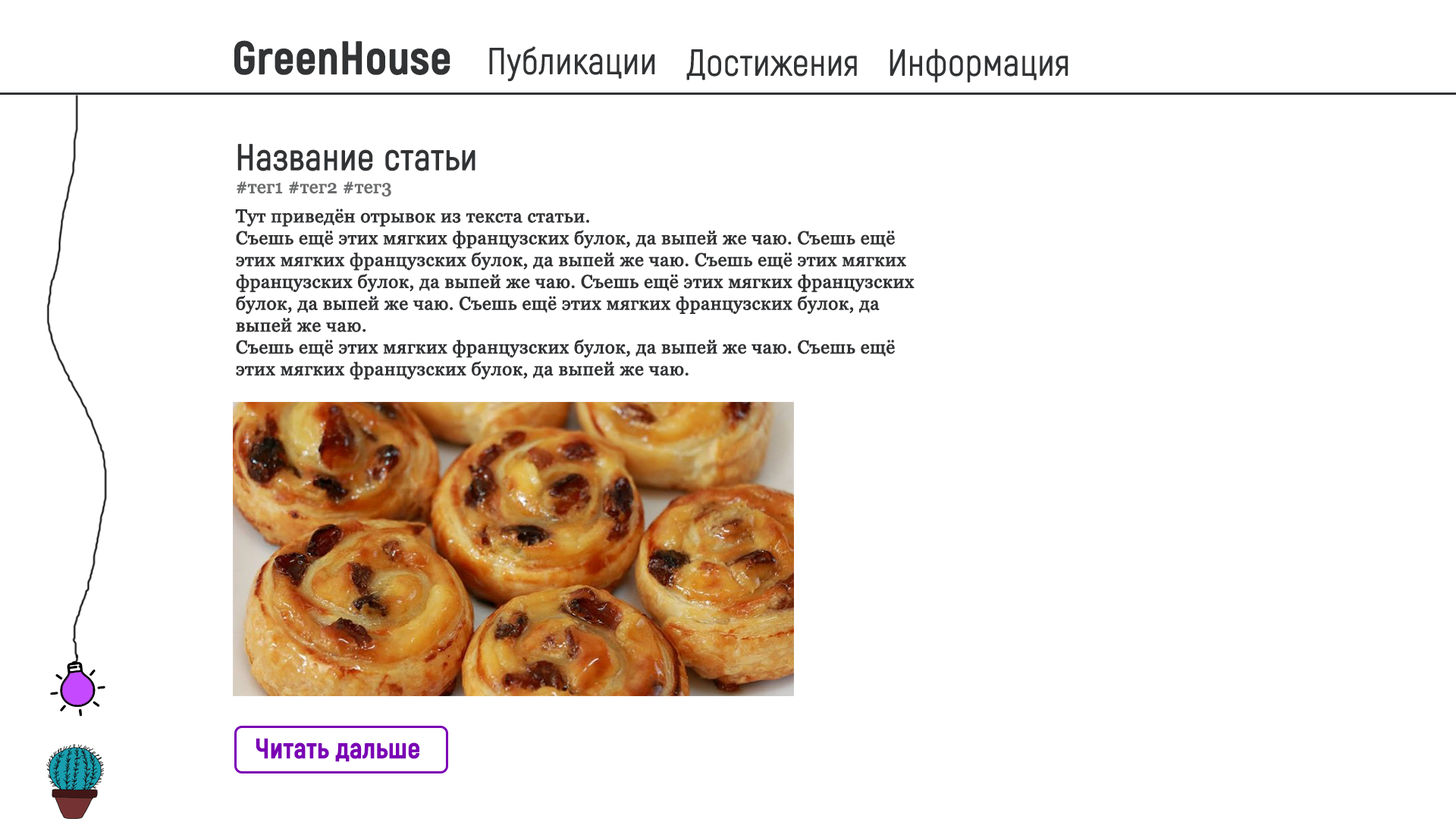
<style>
.page{position:relative;width:1456px;height:819px;background:#ffffff}
.page>*{position:absolute;margin:0}
.t1{font:45.5px "Akrobat-Bold";color:#313335;font-weight:bold}
.t2{font:36.4px "Akrobat-Light";color:#313335;font-weight:bold}
.t3{font:36.4px "Akrobat-Regular";color:#313335;font-weight:bold}
.t4{font:18.2px "Georgia";color:#6b6c6d;font-weight:bold}
.t5{font:18.2px "Georgia";color:#313335;font-weight:bold}
.t6{font:18.2px/6.1px "Georgia";color:#313335;font-weight:bold}
.t7{font:27.3px "Akrobat-Bold";color:#7b00b5;font-weight:bold}
</style>
<div class="page">
<p class="t1" style="left:234px;top:40px;width:216px;height:35px">GreenHouse</p>
<p class="t2" style="left:489px;top:46px;width:166px;height:35px">Публикации</p>
<p class="t2" style="left:686px;top:49px;width:171px;height:31px">Достижения</p>
<p class="t2" style="left:890px;top:49px;width:178px;height:34px">Информация</p>
<p class="t3" style="left:237px;top:143px;width:238px;height:28px">Название статьи</p>
<p class="t4" style="left:237px;top:181px;width:154px;height:16px">#тег1 #тег2 #тег3</p>
<p class="t5" style="left:235px;top:209px;width:680px;height:171px"><span class="t6">Тут приведён отрывок из текста статьи. <br>С</span>ъешь ещё этих мягких французских булок, да выпей же чаю. Съешь ещё этих мягких французских булок, да выпей же чаю. Съешь ещё этих мягких французских булок, да выпей же чаю. Съешь ещё этих мягких французских булок, да выпей же чаю. Съешь ещё этих мягких французских булок, да выпей же чаю.<br>Съешь ещё этих мягких французских булок, да выпей же чаю. Съешь ещё этих мягких французских булок, да выпей же чаю.</p>
<p class="t7" style="left:256px;top:738px;width:164px;height:24px">Читать дальше</p>
</div>
